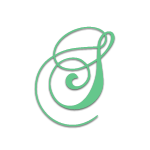
<style>
.page{position:relative;width:150px;height:150px;background:#ffffff}
.page>*{position:absolute;margin:0}
.t1{font:114px "ChopinScript";color:#65c78c}
</style>
<div class="page">
<p class="t1" style="left:35px;top:26px;width:80px;height:101px">S</p>
</div>
